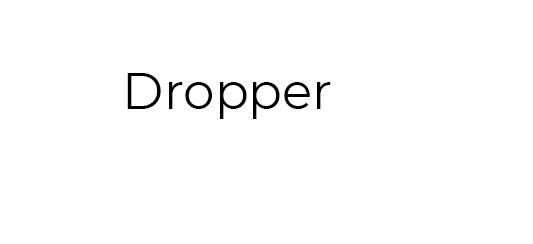
<style>
.page{position:relative;width:533px;height:244px;background:#ffffff}
.page>*{position:absolute;margin:0}
.t1{font:50px "Montserrat-Regular";color:#000000}
</style>
<div class="page">
<p class="t1" style="left:127px;top:73px;width:204px;height:46px">Dropper</p>
</div>
